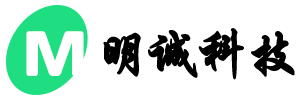
<style>
.page{position:relative;width:300px;height:100px;background:#ffffff}
.page>*{position:absolute;margin:0}
.t1{font:52px "STXingkai";letter-spacing:-0.06em;color:#000000;font-weight:bold}
</style>
<div class="page">
<p class="t1" style="left:103px;top:28px;width:192px;height:52px">明诚科技</p>
</div>
